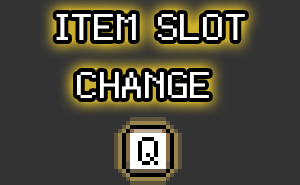
<style>
.page{position:relative;width:300px;height:185px;background:#333333}
.page>*{position:absolute;margin:0}
.t1{font:52px "Silver";color:#ffffff;scale:1.3 1}
</style>
<div class="page">
<p class="t1" style="left:56px;top:14px;width:189px;height:26px">ITEM SLOT</p>
<p class="t1" style="left:77px;top:72px;width:132px;height:26px">CHANGE</p>
</div>
